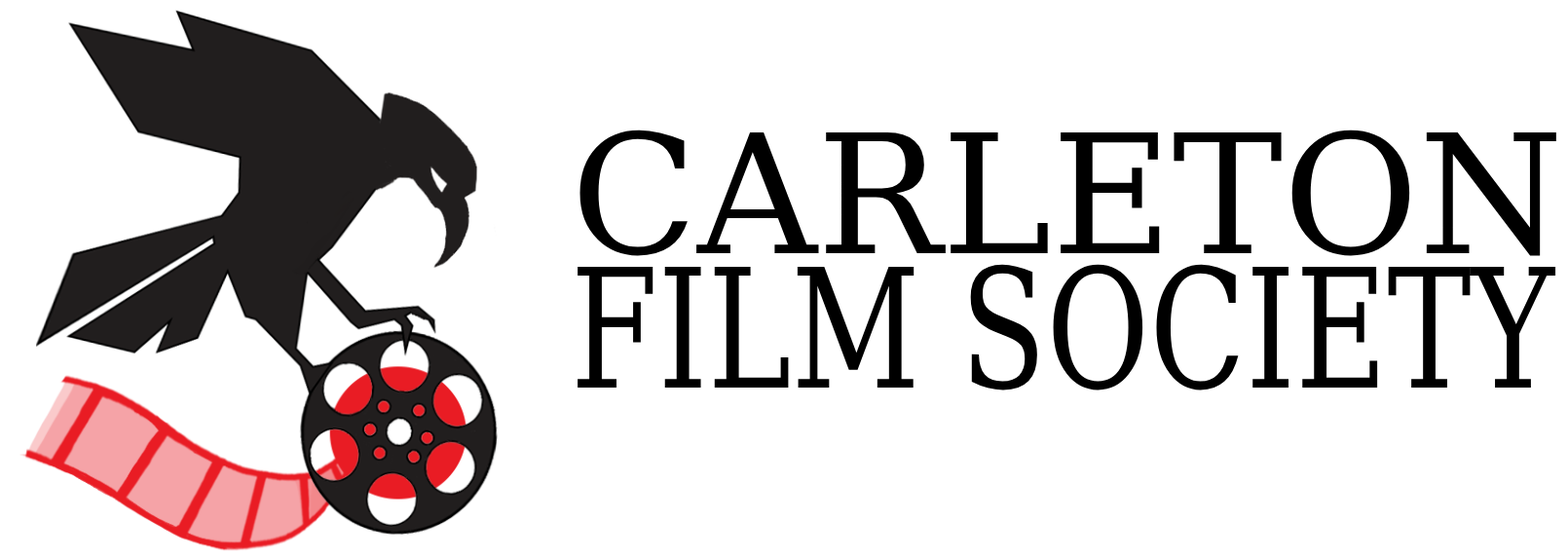
<style>
.page{position:relative;width:1568px;height:557px;background:#ffffff}
.page>*{position:absolute;margin:0}
.t1{font:165.6px "DejaVuSerif";color:#000000}
.t2{font:165.6px "DejaVuSerif";color:#000000;scale:0.76 1}
</style>
<div class="page">
<p class="t1" style="left:579px;top:130px;width:977px;height:126px">CARLETON</p>
<p class="t2" style="left:578px;top:264px;width:978px;height:127px">FILM SOCIETY</p>
</div>
